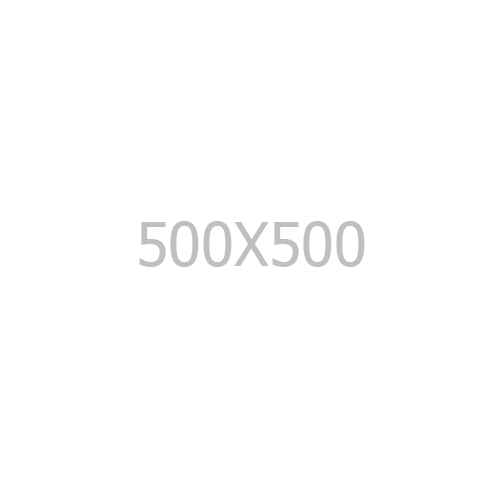
<style>
.page{position:relative;width:500px;height:500px;background:#ffffff}
.page>*{position:absolute;margin:0}
.t1{font:60px "Tahoma";color:#c1bfbf}
</style>
<div class="page">
<p class="t1" style="left:139px;top:221px;width:226px;height:46px">500X500</p>
</div>
